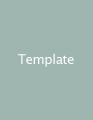
<style>
.page{position:relative;width:93px;height:120px;background:#9eb6af}
.page>*{position:absolute;margin:0}
.t1{font:13px "LucidaGrande";letter-spacing:-0.025em;color:#ffffff}
</style>
<div class="page">
<p class="t1" style="left:18px;top:53px;width:56px;height:14px">Template</p>
</div>
